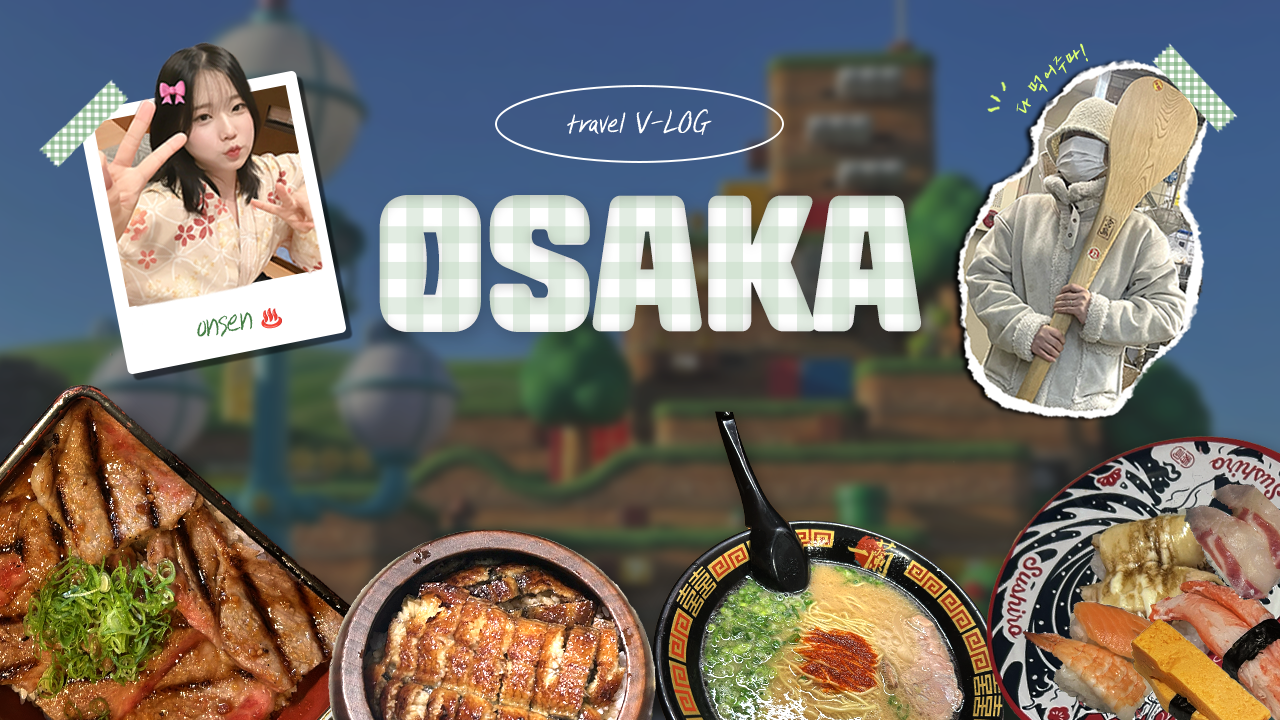
<style>
.page{position:relative;width:1280px;height:720px}
.page>*{position:absolute;margin:0}
.t1{font:23.9px "SDGongPil-bBd";color:#ddff74}
.t2{font:32.1px "SDGongPil-bBd";color:#ffffff;font-style:italic}
.t3{font:152.5px "RixInooAriDuriPR";color:#e3ece3}
.t4{font:39.3px "SDGongPil-aMd";letter-spacing:-0.05em;font-style:italic}
.t5{font:18px "NotoColorEmoji-SVG";letter-spacing:-0.05em;font-style:italic}
</style>
<div class="page">
<p class="t1" style="left:1016px;top:43px;width:72px;height:71px;rotate:15deg">다 먹어주마!</p>
<p class="t2" style="left:567px;top:109px;width:145px;height:26px">travel V-LOG</p>
<p class="t3" style="left:379px;top:195px;width:542px;height:137px">OSAKA</p>
<p class="t4" style="left:197px;top:308px;width:85px;height:29px;rotate:-11deg">onsen <span class="t5">♨️</span></p>
</div>
